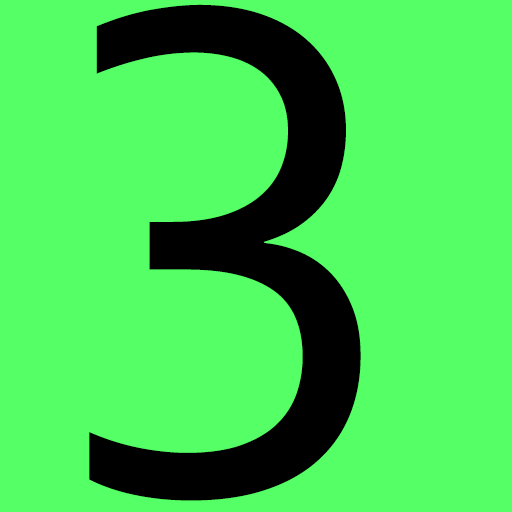
<style>
.page{position:relative;width:512px;height:512px;background:#55ff66}
.page>*{position:absolute;margin:0}
.t1{font:731px "Corbel";color:#000000}
</style>
<div class="page">
<p class="t1" style="left:89px;top:4px;width:272px;height:497px">3</p>
</div>
